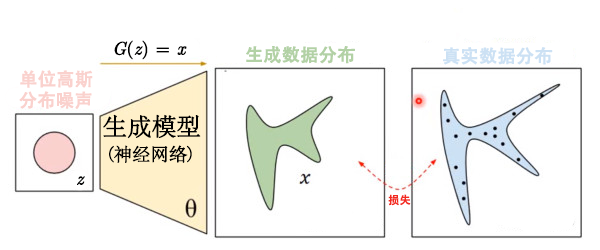
<style>
.page{position:relative;width:600px;height:250px;background:#ffffff}
.page>*{position:absolute;margin:0}
.t1{font:18px "Euclid";color:#000000;font-weight:bold}
.t2{font:18px "Euclid-Italic";color:#000000;font-weight:bold}
.t3{font:18px "AdobeHeitiStd-Regular";color:#b2d1a5;font-weight:bold}
.t4{font:18px "AdobeHeitiStd-Regular";color:#cce1f4;font-weight:bold}
.t5{font:18px "AdobeHeitiStd-Regular";color:#fad1cd;font-weight:bold}
.t6{font:24px "STSong";color:#000000;font-weight:bold}
.t7{font:18px "STSong";color:#000000;font-weight:bold}
.t8{font:11px "AdobeHeitiStd-Regular";color:#f3291f;font-weight:bold}
</style>
<div class="page">
<p class="t1" style="left:114px;top:40px;width:73px;height:20px"><span class="t2">G</span>(<span class="t2">z</span>) =<span class="t2"> x</span></p>
<p class="t3" style="left:246px;top:46px;width:109px;height:18px">生成数据分布</p>
<p class="t4" style="left:443px;top:47px;width:110px;height:18px">真实数据分布</p>
<p class="t5" style="left:20px;top:70px;width:73px;height:18px">单位高斯</p>
<p class="t5" style="left:19px;top:91px;width:73px;height:18px">分布噪声</p>
<p class="t6" style="left:103px;top:114px;width:98px;height:25px">生成模型</p>
<p class="t7" style="left:109px;top:145px;width:83px;height:18px">(神经网络)</p>
<p class="t2" style="left:77px;top:176px;width:8px;height:9px">z</p>
<p class="t8" style="left:388px;top:194px;width:23px;height:12px">损失</p>
</div>
